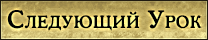
<style>
.page{position:relative;width:208px;height:40px}
.page>*{position:absolute;margin:0}
.t1{font:24px "OsvaldC-Bold";letter-spacing:0.03em;color:#000000;font-variant:small-caps}
</style>
<div class="page">
<p class="t1" style="left:7px;top:10px;width:195px;height:21px">Cледующий Урок</p>
</div>
